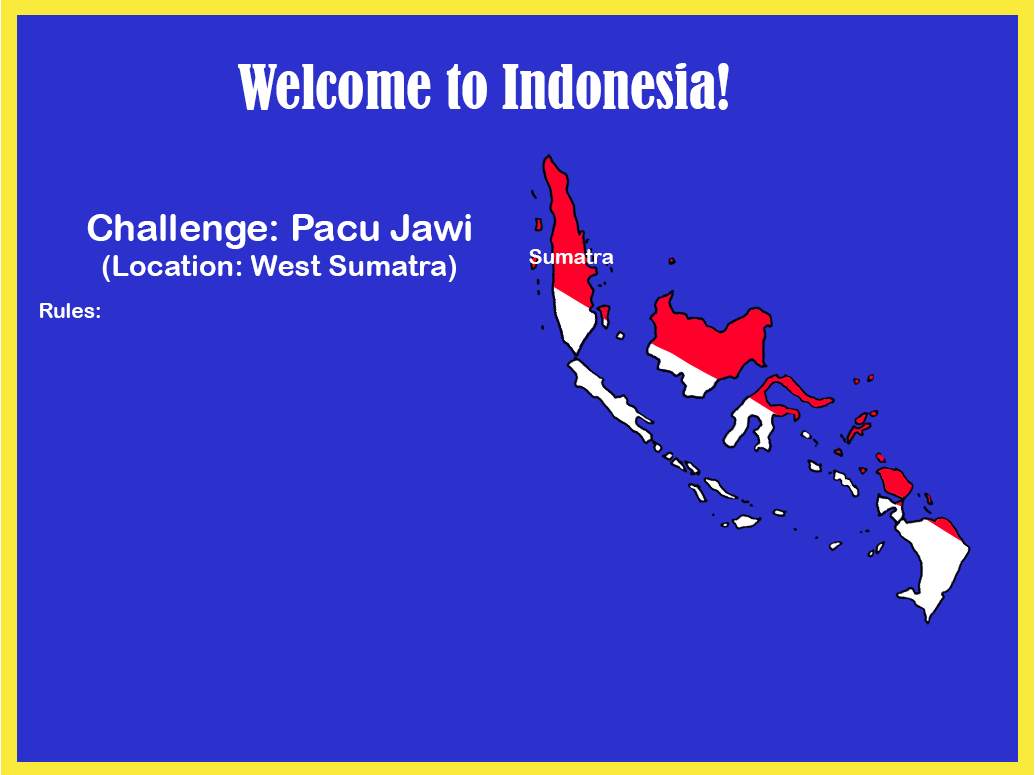
<style>
.page{position:relative;width:1035px;height:775px;background:#2c30cd}
.page>*{position:absolute;margin:0}
.t1{font:56.9px "BernardMT-Condensed";color:#ffffff}
.t2{font:29.2px "ArialRoundedMTBold";color:#ffffff}
.t3{font:37.5px "ArialRoundedMTBold";color:#ffffff}
.t4{font:20.9px "ArialRoundedMTBold";color:#ffffff}
</style>
<div class="page">
<p class="t1" style="left:238px;top:63px;width:491px;height:47px">Welcome to Indonesia!</p>
<p class="t2" style="left:87px;top:214px;width:384px;height:68px;text-align:center"><span class="t3">Challenge: Pacu Jawi<br></span>(Location: West Sumatra)</p>
<p class="t4" style="left:529px;top:249px;width:85px;height:15px">Sumatra</p>
<p class="t4" style="left:40px;top:303px;width:60px;height:15px">Rules:</p>
</div>
